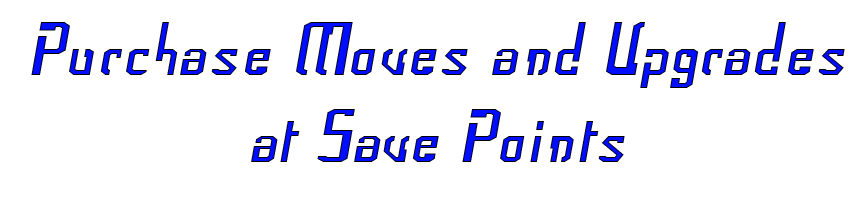
<style>
.page{position:relative;width:860px;height:200px;background:#ffffff}
.page>*{position:absolute;margin:0}
.t1{font:72px "Frak-Regular";color:#000dff}
</style>
<div class="page">
<p class="t1" style="left:31px;top:22px;width:814px;height:140px;text-align:center">Purchase Moves and Upgrades<br>at Save Points</p>
</div>
